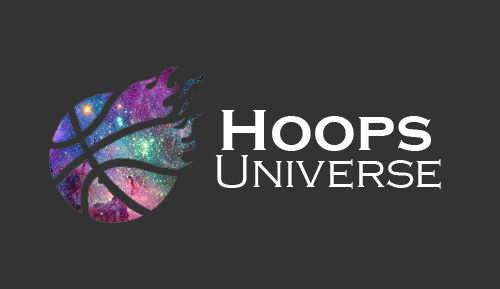
<style>
.page{position:relative;width:500px;height:289px;background:#333333}
.page>*{position:absolute;margin:0}
.t1{font:60.5px "CopperplateGothic-Bold";color:#ffffff}
.t2{font:48px "CopperplateGothic-Light";color:#ffffff}
</style>
<div class="page">
<p class="t1" style="left:221px;top:110px;width:210px;height:41px">Hoops</p>
<p class="t2" style="left:215px;top:155px;width:226px;height:34px">Universe</p>
</div>
